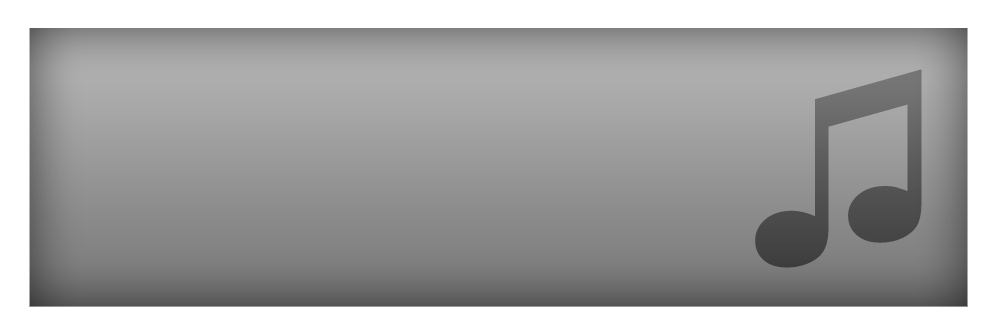
<style>
.page{position:relative;width:1000px;height:333px;background:#ffffff}
.page>*{position:absolute;margin:0}
.t1{font:245.9px "ArialMT";scale:1.11 1}
</style>
<div class="page">
<p class="t1" style="left:755px;top:69px;width:167px;height:199px">♫</p>
</div>
